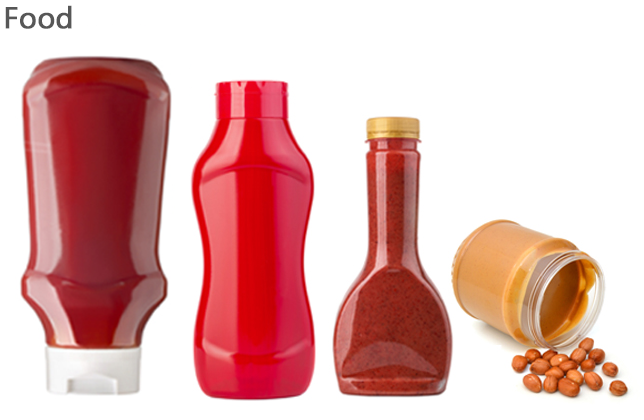
<style>
.page{position:relative;width:644px;height:420px;background:#ffffff}
.page>*{position:absolute;margin:0}
.t1{font:30px "Gadugi";color:#575757;font-weight:bold}
</style>
<div class="page">
<p class="t1" style="left:5px;top:5px;width:67px;height:24px">Food</p>
</div>
